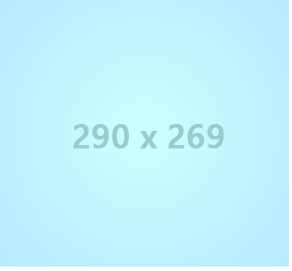
<style>
.page{position:relative;width:292px;height:271px}
.page>*{position:absolute;margin:0}
.t1{font:33px "SegoeUI-Semibold";color:#99cccc;font-weight:bold}
</style>
<div class="page">
<p class="t1" style="left:73px;top:124px;width:151px;height:25px">290 x 269</p>
</div>
